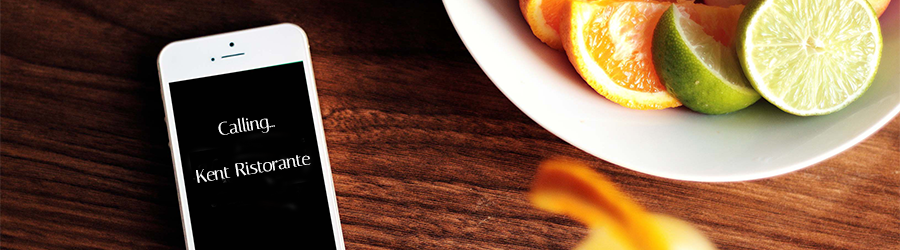
<style>
.page{position:relative;width:900px;height:250px}
.page>*{position:absolute;margin:0}
.t1{font:18px "Italiana-Regular";color:#ffffff}
</style>
<div class="page">
<p class="t1" style="left:196px;top:117px;width:115px;height:66px;text-align:center;rotate:-9deg">Calling...<br><br>Kent Ristorante</p>
</div>
